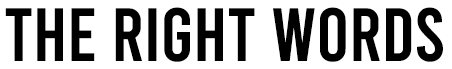
<style>
.page{position:relative;width:452px;height:69px;background:#ffffff}
.page>*{position:absolute;margin:0}
.t1{font:75px "Bebas-Regular";color:#000000}
</style>
<div class="page">
<p class="t1" style="left:5px;top:7px;width:438px;height:55px">THE RIGHT WORDS</p>
</div>
